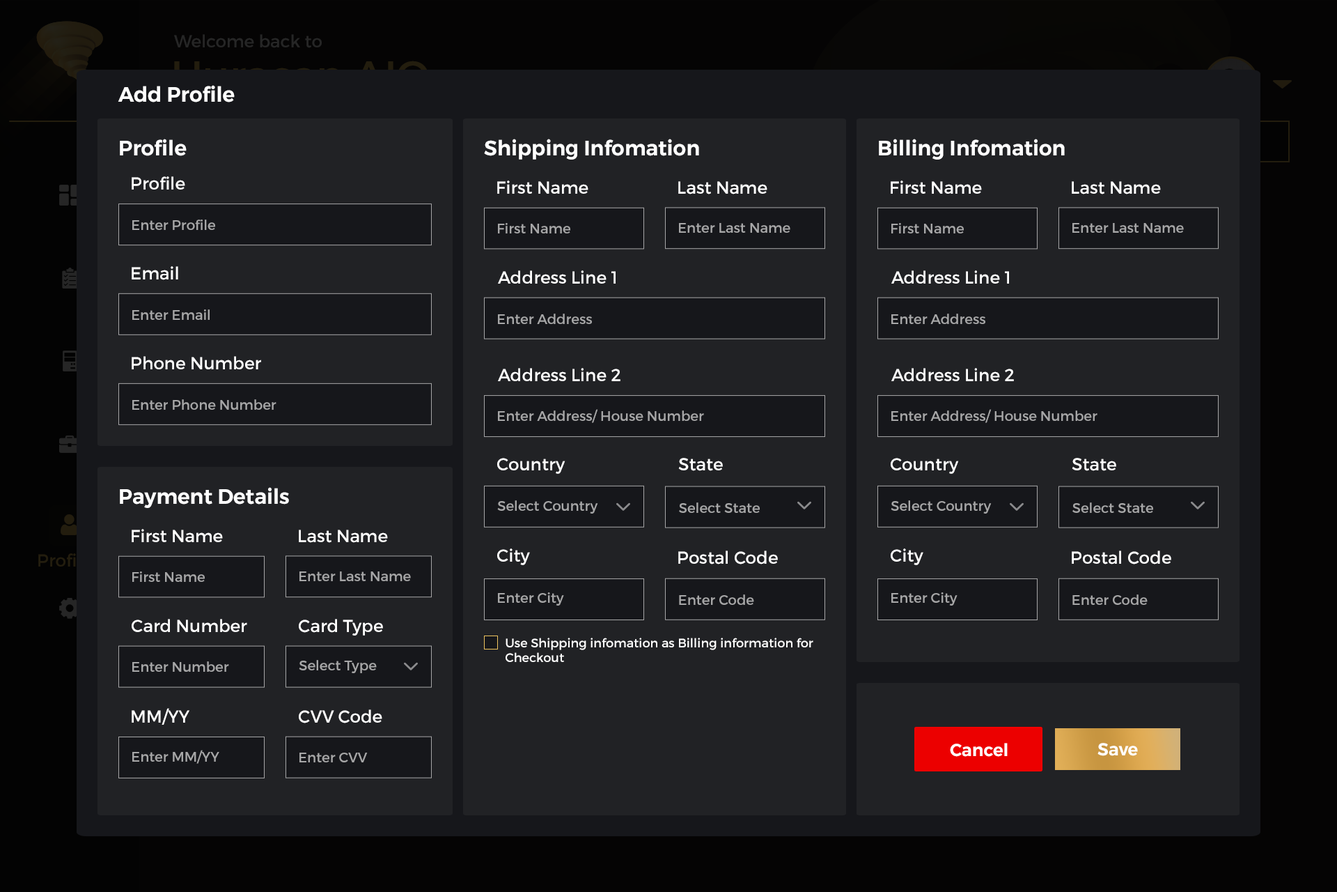
<style>
.page{position:relative;width:1337px;height:892px;background:#212225}
.page>*{position:absolute;margin:0}
.t1{font:20.9px "Montserrat-SemiBold";color:#ffffff}
.t2{font:17.4px "Montserrat-Regular";color:#ffffff}
.t3{font:13.9px "Montserrat-Regular";color:#a7a7a8}
.t4{font:12.5px "Montserrat-Regular";color:#ffffff}
.t5{font:17.4px "Montserrat-SemiBold";color:#ffffff}
</style>
<div class="page">
<p class="t1" style="left:118px;top:85px;width:117px;height:17px">Add Profile</p>
<p class="t1" style="left:120px;top:139px;width:67px;height:17px">Profile</p>
<p class="t1" style="left:484px;top:139px;width:215px;height:21px">Shipping Infomation</p>
<p class="t1" style="left:879px;top:139px;width:186px;height:21px">Billing Infomation</p>
<p class="t2" style="left:132px;top:176px;width:53px;height:13px">Profile</p>
<p class="t2" style="left:497px;top:180px;width:92px;height:14px">First Name</p>
<p class="t2" style="left:678px;top:181px;width:90px;height:13px">Last Name</p>
<p class="t2" style="left:891px;top:180px;width:91px;height:14px">First Name</p>
<p class="t2" style="left:1072px;top:181px;width:89px;height:13px">Last Name</p>
<p class="t3" style="left:132px;top:219px;width:83px;height:11px">Enter Profile</p>
<p class="t3" style="left:498px;top:223px;width:72px;height:10px">First Name</p>
<p class="t3" style="left:679px;top:223px;width:112px;height:10px">Enter Last Name</p>
<p class="t3" style="left:892px;top:223px;width:72px;height:10px">First Name</p>
<p class="t3" style="left:1073px;top:223px;width:111px;height:10px">Enter Last Name</p>
<p class="t2" style="left:132px;top:266px;width:46px;height:14px">Email</p>
<p class="t2" style="left:498px;top:270px;width:118px;height:14px">Address Line 1</p>
<p class="t2" style="left:892px;top:270px;width:117px;height:14px">Address Line 1</p>
<p class="t3" style="left:132px;top:309px;width:78px;height:11px">Enter Email</p>
<p class="t3" style="left:498px;top:313px;width:94px;height:11px">Enter Address</p>
<p class="t3" style="left:892px;top:313px;width:94px;height:11px">Enter Address</p>
<p class="t2" style="left:132px;top:356px;width:129px;height:13px">Phone Number</p>
<p class="t2" style="left:498px;top:368px;width:123px;height:13px">Address Line 2</p>
<p class="t2" style="left:892px;top:368px;width:122px;height:13px">Address Line 2</p>
<p class="t3" style="left:132px;top:399px;width:145px;height:11px">Enter Phone Number</p>
<p class="t3" style="left:498px;top:409px;width:206px;height:14px">Enter Address/ House Number</p>
<p class="t3" style="left:892px;top:409px;width:206px;height:14px">Enter Address/ House Number</p>
<p class="t2" style="left:497px;top:458px;width:69px;height:16px">Country</p>
<p class="t2" style="left:678px;top:458px;width:45px;height:13px">State</p>
<p class="t2" style="left:891px;top:458px;width:68px;height:16px">Country</p>
<p class="t2" style="left:1072px;top:458px;width:45px;height:13px">State</p>
<p class="t1" style="left:120px;top:487px;width:169px;height:21px">Payment Details</p>
<p class="t3" style="left:497px;top:500px;width:101px;height:13px">Select Country</p>
<p class="t3" style="left:679px;top:502px;width:81px;height:11px">Select State</p>
<p class="t3" style="left:891px;top:500px;width:101px;height:13px">Select Country</p>
<p class="t3" style="left:1073px;top:502px;width:81px;height:11px">Select State</p>
<p class="t2" style="left:132px;top:529px;width:91px;height:13px">First Name</p>
<p class="t2" style="left:299px;top:529px;width:89px;height:14px">Last Name</p>
<p class="t2" style="left:497px;top:548px;width:33px;height:17px">City</p>
<p class="t2" style="left:678px;top:550px;width:100px;height:14px">Postal Code</p>
<p class="t2" style="left:891px;top:548px;width:33px;height:17px">City</p>
<p class="t2" style="left:1072px;top:550px;width:100px;height:14px">Postal Code</p>
<p class="t3" style="left:132px;top:571px;width:73px;height:11px">First Name</p>
<p class="t3" style="left:300px;top:571px;width:111px;height:10px">Enter Last Name</p>
<p class="t3" style="left:498px;top:592px;width:66px;height:13px">Enter City</p>
<p class="t3" style="left:892px;top:592px;width:66px;height:13px">Enter City</p>
<p class="t3" style="left:679px;top:594px;width:75px;height:11px">Enter Code</p>
<p class="t3" style="left:1073px;top:594px;width:75px;height:11px">Enter Code</p>
<p class="t2" style="left:132px;top:619px;width:115px;height:13px">Card Number</p>
<p class="t2" style="left:299px;top:619px;width:84px;height:16px">Card Type</p>
<p class="t4" style="left:506px;top:637px;width:308px;height:25px">Use Shipping infomation as Billing information for <br>Checkout</p>
<p class="t3" style="left:132px;top:661px;width:97px;height:10px">Enter Number</p>
<p class="t3" style="left:299px;top:660px;width:78px;height:13px">Select Type</p>
<p class="t2" style="left:132px;top:708px;width:57px;height:16px">MM/YY</p>
<p class="t2" style="left:299px;top:709px;width:83px;height:14px">CVV Code</p>
<p class="t3" style="left:132px;top:750px;width:87px;height:13px">Enter MM/YY</p>
<p class="t5" style="left:950px;top:743px;width:58px;height:13px">Cancel</p>
<p class="t5" style="left:1098px;top:743px;width:40px;height:13px">Save</p>
<p class="t3" style="left:300px;top:752px;width:68px;height:10px">Enter CVV</p>
</div>
